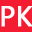
<style>
.page{position:relative;width:32px;height:32px;background:#f41c30}
.page>*{position:absolute;margin:0}
.t1{font:26px "MicrosoftYaHei";color:#fcfcfc;font-weight:bold}
</style>
<div class="page">
<p class="t1" style="left:1px;top:6px;width:32px;height:21px">PK</p>
</div>
